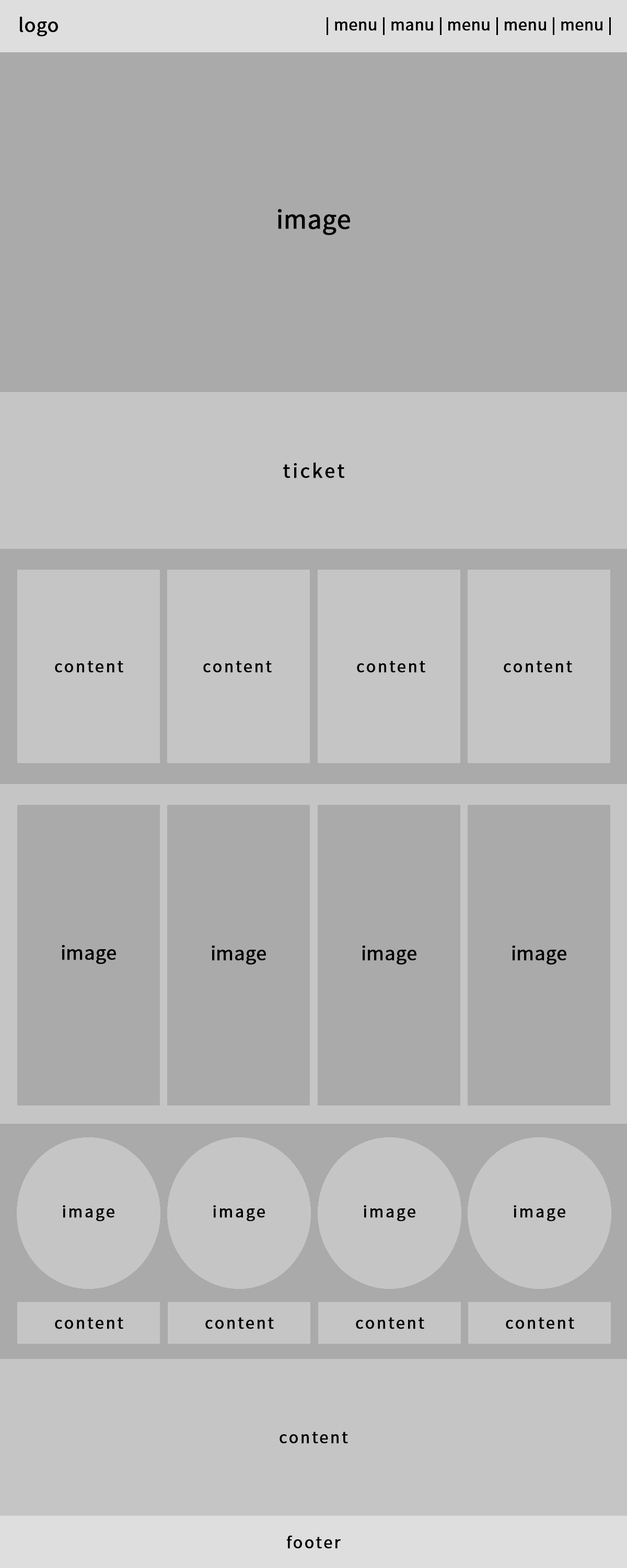
<style>
.page{position:relative;width:627px;height:1568px;background:#aaaaaa}
.page>*{position:absolute;margin:0}
.t1{font:18.8px "NotoSansKR-Regular";color:#000000;font-weight:bold}
.t2{font:15.7px "NotoSansKR-Regular";color:#000000;font-weight:bold}
.t3{font:25.1px "NotoSansKR-Regular";color:#000000;font-weight:bold}
.t4{font:18.8px "NotoSansKR-Regular";letter-spacing:0.1em;color:#000000;font-weight:bold}
.t5{font:15.7px "NotoSansKR-Regular";letter-spacing:0.1em;color:#000000;font-weight:bold}
</style>
<div class="page">
<p class="t1" style="left:20px;top:17px;width:38px;height:20px">logo</p>
<p class="t2" style="left:327px;top:17px;width:284px;height:18px">| menu | manu | menu | menu | menu |</p>
<p class="t3" style="left:278px;top:209px;width:72px;height:26px">image</p>
<p class="t4" style="left:283px;top:463px;width:62px;height:15px">ticket</p>
<p class="t5" style="left:55px;top:661px;width:68px;height:12px">content</p>
<p class="t5" style="left:203px;top:661px;width:69px;height:12px">content</p>
<p class="t5" style="left:357px;top:661px;width:68px;height:12px">content</p>
<p class="t5" style="left:504px;top:661px;width:68px;height:12px">content</p>
<p class="t1" style="left:62px;top:945px;width:54px;height:19px">image</p>
<p class="t1" style="left:212px;top:946px;width:54px;height:19px">image</p>
<p class="t1" style="left:362px;top:946px;width:55px;height:19px">image</p>
<p class="t1" style="left:512px;top:946px;width:55px;height:19px">image</p>
<p class="t5" style="left:63px;top:1205px;width:51px;height:16px">image</p>
<p class="t5" style="left:213px;top:1205px;width:52px;height:16px">image</p>
<p class="t5" style="left:364px;top:1205px;width:52px;height:16px">image</p>
<p class="t5" style="left:514px;top:1205px;width:52px;height:16px">image</p>
<p class="t5" style="left:55px;top:1317px;width:68px;height:12px">content</p>
<p class="t5" style="left:205px;top:1317px;width:69px;height:12px">content</p>
<p class="t5" style="left:356px;top:1317px;width:68px;height:12px">content</p>
<p class="t5" style="left:506px;top:1317px;width:68px;height:12px">content</p>
<p class="t5" style="left:280px;top:1432px;width:68px;height:12px">content</p>
<p class="t5" style="left:286px;top:1536px;width:55px;height:13px">footer</p>
</div>
